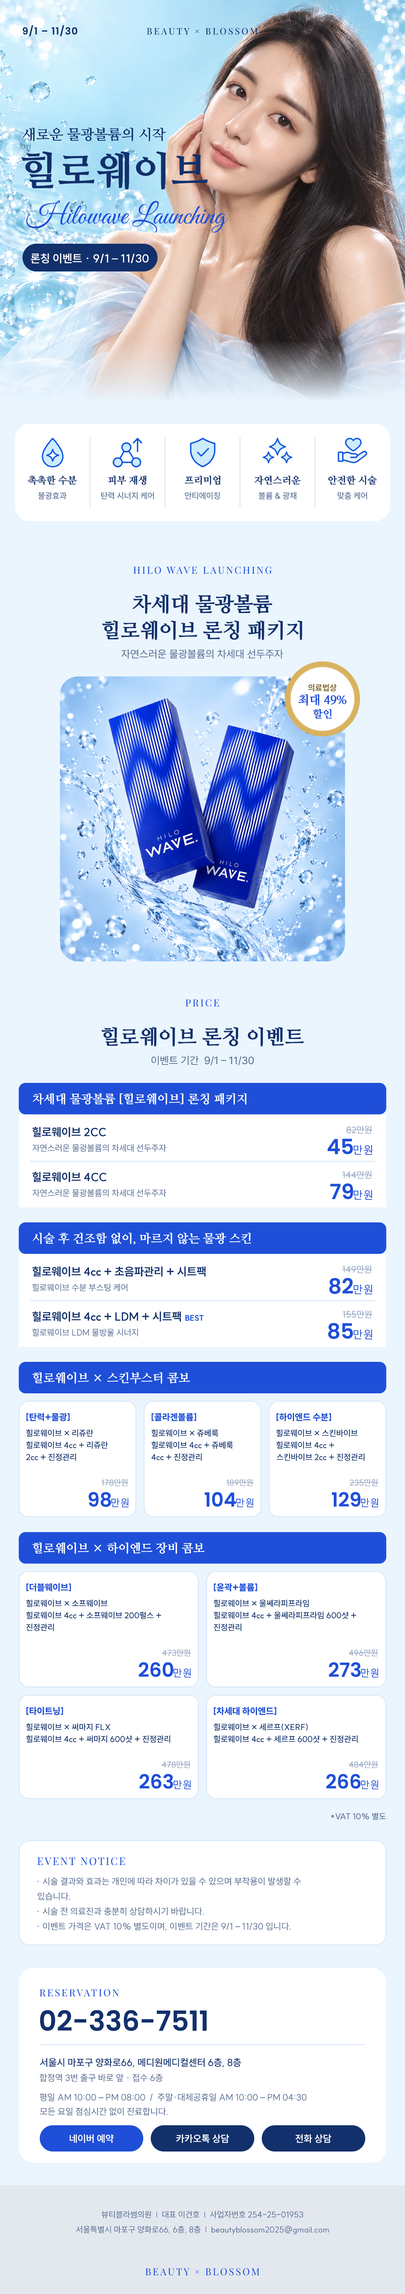
<style>
.page{position:relative;width:405px;height:2294px;background:#ffffff}
.page>*{position:absolute;margin:0}
.t1{font:9.8px "Poppins-SemiBold";letter-spacing:0.06em;color:#12306b}
.t2{font:9px "PlayfairDisplay-Regular";letter-spacing:0.2em;color:#12306b}
.t3{font:14.2px "NanumMyeongjoBold";color:#12306b}
.t4{font:39.8px "NanumMyeongjoExtraBold";color:#12306b}
.t5{font:28.5px "GreatVibes-Regular";color:#1f4fd8}
.t6{font:11.2px "SUIT-Bold";color:#ffffff}
.t7{font:9.8px "NanumMyeongjoExtraBold";color:#12306b}
.t8{font:8.2px "SUIT-Medium";color:#5b6f94}
.t9{font:8.2px "SUIT-Medium"}
.t10{font:9.8px "PlayfairDisplay-Regular";letter-spacing:0.16em}
.t11{font:20.2px "NanumMyeongjoExtraBold";color:#12306b}
.t12{font:10.5px "Pretendard-Regular";color:#5b6f94}
.t13{font:8.2px "SUIT-Bold";color:#7a6428}
.t14{font:12px "NanumMyeongjoExtraBold";color:#1f4fd8}
.t15{font:10.5px "NanumMyeongjoExtraBold";color:#1f4fd8}
.t16{font:9.8px "PlayfairDisplay-Regular";letter-spacing:0.16em;color:#1f4fd8}
.t17{font:12px "NanumMyeongjoExtraBold";color:#ffffff}
.t18{font:11.2px "SUIT-Bold";color:#12306b}
.t19{font:9px "SUIT-Medium";color:#9aa9c4}
.t20{font:8.6px "SUIT-Regular";color:#5b6f94}
.t21{font:21px "Poppins-SemiBold";color:#1f4fd8}
.t22{font:10.5px "Poppins-SemiBold";color:#1f4fd8}
.t23{font:7.5px "SUIT-ExtraBold";color:#1f4fd8}
.t24{font:9px "SUIT-ExtraBold";color:#1f4fd8}
.t25{font:8.2px "SUIT-Medium";color:#12306b}
.t26{font:8.2px "SUIT-Medium";color:#9aa9c4}
.t27{font:19.5px "Poppins-SemiBold";color:#1f4fd8}
.t28{font:9.8px "Poppins-SemiBold";color:#1f4fd8}
.t29{font:10.5px "PlayfairDisplay-Regular";letter-spacing:0.12em;color:#1f4fd8}
.t30{font:9px "SUIT-Regular";color:#5b6f94}
.t31{font:27.8px "Poppins-SemiBold";color:#12306b}
.t32{font:9.8px "SUIT-Medium";color:#12306b}
.t33{font:9.8px "SUIT-Bold";color:#ffffff}
.t34{font:8.2px "SUIT-Regular";color:#5b6f94}
</style>
<div class="page">
<p class="t1" style="left:22px;top:25px;width:55px;height:11px">9/1 – 11/30</p>
<p class="t2" style="left:147px;top:28px;width:111px;height:7px">BEAUTY × BLOSSOM</p>
<p class="t3" style="left:22px;top:128px;width:144px;height:13px">새로운 물광볼륨의 시작</p>
<p class="t4" style="left:21px;top:151px;width:187px;height:39px">힐로웨이브</p>
<p class="t5" style="left:26px;top:200px;width:202px;height:33px">Hilowave Launching</p>
<p class="t6" style="left:31px;top:253px;width:118px;height:11px">론칭 이벤트 · 9/1 – 11/30</p>
<p class="t7" style="left:28px;top:476px;width:49px;height:9px">촉촉한 수분</p>
<p class="t7" style="left:108px;top:476px;width:39px;height:9px">피부 재생</p>
<p class="t7" style="left:184px;top:476px;width:36px;height:9px">프리미엄</p>
<p class="t7" style="left:254px;top:476px;width:46px;height:9px">자연스러운</p>
<p class="t7" style="left:328px;top:476px;width:48px;height:9px">안전한 시술</p>
<p class="t8" style="left:38px;top:492px;width:29px;height:8px">물광효과</p>
<p class="t9" style="left:100px;top:492px;width:54px;height:8px">탄력 시너지 케어</p>
<p class="t8" style="left:185px;top:492px;width:35px;height:8px">안티에이징</p>
<p class="t8" style="left:258px;top:492px;width:38px;height:8px">볼륨 &amp; 광채</p>
<p class="t8" style="left:338px;top:492px;width:29px;height:8px">맞춤 케어</p>
<p class="t10" style="left:133px;top:567px;width:138px;height:7px">HILO WAVE LAUNCHING</p>
<p class="t11" style="left:132px;top:594px;width:140px;height:20px">차세대 물광볼륨</p>
<p class="t11" style="left:102px;top:621px;width:200px;height:19px">힐로웨이브 론칭 패키지</p>
<p class="t12" style="left:121px;top:649px;width:163px;height:10px">자연스러운 물광볼륨의 차세대 선두주자</p>
<p class="t13" style="left:308px;top:684px;width:29px;height:8px">의료법상</p>
<p class="t14" style="left:298px;top:694px;width:48px;height:12px">최대 49%</p>
<p class="t15" style="left:312px;top:709px;width:20px;height:10px">할인</p>
<p class="t16" style="left:186px;top:999px;width:33px;height:8px">PRICE</p>
<p class="t11" style="left:101px;top:1027px;width:202px;height:20px">힐로웨이브 론칭 이벤트</p>
<p class="t12" style="left:151px;top:1056px;width:103px;height:9px">이벤트 기간  9/1 – 11/30</p>
<p class="t17" style="left:32px;top:1093px;width:215px;height:12px">차세대 물광볼륨 [힐로웨이브] 론칭 패키지</p>
<p class="t18" style="left:32px;top:1127px;width:74px;height:10px">힐로웨이브 2CC</p>
<p class="t19" style="left:346px;top:1126px;width:26px;height:8px">82만원</p>
<p class="t20" style="left:32px;top:1144px;width:134px;height:8px">자연스러운 물광볼륨의 차세대 선두주자</p>
<p class="t21" style="left:327px;top:1139px;width:26px;height:15px">45</p>
<p class="t22" style="left:354px;top:1145px;width:18px;height:10px">만원</p>
<p class="t18" style="left:32px;top:1172px;width:74px;height:10px">힐로웨이브 4CC</p>
<p class="t19" style="left:342px;top:1171px;width:30px;height:8px">144만원</p>
<p class="t20" style="left:32px;top:1189px;width:134px;height:8px">자연스러운 물광볼륨의 차세대 선두주자</p>
<p class="t21" style="left:330px;top:1184px;width:23px;height:15px">79</p>
<p class="t22" style="left:354px;top:1190px;width:18px;height:10px">만원</p>
<p class="t17" style="left:32px;top:1233px;width:219px;height:12px">시술 후 건조함 없이, 마르지 않는 물광 스킨</p>
<p class="t19" style="left:342px;top:1265px;width:30px;height:9px">149만원</p>
<p class="t18" style="left:32px;top:1266px;width:174px;height:11px">힐로웨이브 4cc + 초음파관리 + 시트팩</p>
<p class="t21" style="left:329px;top:1278px;width:24px;height:16px">82</p>
<p class="t20" style="left:32px;top:1284px;width:96px;height:8px">힐로웨이브 수분 부스팅 케어</p>
<p class="t22" style="left:354px;top:1285px;width:18px;height:9px">만원</p>
<p class="t18" style="left:32px;top:1311px;width:149px;height:11px">힐로웨이브 4cc + LDM + 시트팩</p>
<p class="t19" style="left:342px;top:1310px;width:30px;height:8px">155만원</p>
<p class="t23" style="left:185px;top:1315px;width:19px;height:6px">BEST</p>
<p class="t21" style="left:328px;top:1323px;width:25px;height:16px">85</p>
<p class="t20" style="left:32px;top:1329px;width:106px;height:7px">힐로웨이브 LDM 물방울 시너지</p>
<p class="t22" style="left:354px;top:1330px;width:18px;height:10px">만원</p>
<p class="t17" style="left:32px;top:1372px;width:158px;height:12px">힐로웨이브 × 스킨부스터 콤보</p>
<p class="t24" style="left:26px;top:1413px;width:44px;height:8px">[탄력+물광]</p>
<p class="t24" style="left:151px;top:1413px;width:45px;height:8px">[콜라겐볼륨]</p>
<p class="t24" style="left:276px;top:1413px;width:55px;height:8px">[하이엔드 수분]</p>
<p class="t25" style="left:26px;top:1430px;width:67px;height:7px">힐로웨이브 × 리쥬란</p>
<p class="t9" style="left:151px;top:1430px;width:67px;height:7px">힐로웨이브 × 쥬베룩</p>
<p class="t9" style="left:276px;top:1430px;width:81px;height:7px">힐로웨이브 × 스킨바이브</p>
<p class="t25" style="left:26px;top:1442px;width:82px;height:7px">힐로웨이브 4cc + 리쥬란</p>
<p class="t25" style="left:151px;top:1442px;width:82px;height:7px">힐로웨이브 4cc + 쥬베룩</p>
<p class="t9" style="left:276px;top:1442px;width:58px;height:7px">힐로웨이브 4cc +</p>
<p class="t25" style="left:26px;top:1454px;width:50px;height:7px">2cc + 진정관리</p>
<p class="t9" style="left:151px;top:1454px;width:50px;height:7px">4cc + 진정관리</p>
<p class="t9" style="left:276px;top:1454px;width:88px;height:7px">스킨바이브 2cc + 진정관리</p>
<p class="t26" style="left:101px;top:1479px;width:27px;height:7px">178만원</p>
<p class="t26" style="left:226px;top:1479px;width:27px;height:7px">189만원</p>
<p class="t26" style="left:350px;top:1479px;width:28px;height:7px">235만원</p>
<p class="t27" style="left:88px;top:1492px;width:23px;height:15px">98</p>
<p class="t27" style="left:204px;top:1492px;width:32px;height:15px">104</p>
<p class="t27" style="left:332px;top:1492px;width:29px;height:15px">129</p>
<p class="t28" style="left:111px;top:1498px;width:17px;height:10px">만원</p>
<p class="t28" style="left:236px;top:1498px;width:17px;height:10px">만원</p>
<p class="t28" style="left:361px;top:1498px;width:17px;height:10px">만원</p>
<p class="t17" style="left:32px;top:1542px;width:172px;height:12px">힐로웨이브 × 하이엔드 장비 콤보</p>
<p class="t24" style="left:26px;top:1583px;width:45px;height:9px">[더블웨이브]</p>
<p class="t24" style="left:214px;top:1583px;width:43px;height:9px">[윤곽+볼륨]</p>
<p class="t25" style="left:26px;top:1600px;width:82px;height:7px">힐로웨이브 × 소프웨이브</p>
<p class="t25" style="left:214px;top:1600px;width:95px;height:7px">힐로웨이브 × 울쎄라피프라임</p>
<p class="t25" style="left:26px;top:1612px;width:135px;height:7px">힐로웨이브 4cc + 소프웨이브 200펄스 +</p>
<p class="t25" style="left:214px;top:1612px;width:142px;height:7px">힐로웨이브 4cc + 울쎄라피프라임 600샷 +</p>
<p class="t25" style="left:26px;top:1624px;width:28px;height:7px">진정관리</p>
<p class="t25" style="left:214px;top:1624px;width:28px;height:7px">진정관리</p>
<p class="t26" style="left:162px;top:1649px;width:29px;height:8px">473만원</p>
<p class="t26" style="left:349px;top:1649px;width:29px;height:8px">496만원</p>
<p class="t27" style="left:139px;top:1662px;width:34px;height:15px">260</p>
<p class="t28" style="left:174px;top:1668px;width:17px;height:10px">만원</p>
<p class="t27" style="left:329px;top:1662px;width:32px;height:15px">273</p>
<p class="t28" style="left:361px;top:1668px;width:17px;height:10px">만원</p>
<p class="t24" style="left:26px;top:1707px;width:37px;height:8px">[타이트닝]</p>
<p class="t24" style="left:214px;top:1707px;width:62px;height:8px">[차세대 하이엔드]</p>
<p class="t25" style="left:26px;top:1724px;width:84px;height:7px">힐로웨이브 × 써마지 FLX</p>
<p class="t25" style="left:214px;top:1724px;width:94px;height:7px">힐로웨이브 × 세르프(XERF)</p>
<p class="t25" style="left:26px;top:1736px;width:144px;height:7px">힐로웨이브 4cc + 써마지 600샷 + 진정관리</p>
<p class="t25" style="left:214px;top:1736px;width:144px;height:7px">힐로웨이브 4cc + 세르프 600샷 + 진정관리</p>
<p class="t26" style="left:162px;top:1761px;width:28px;height:7px">478만원</p>
<p class="t26" style="left:349px;top:1761px;width:29px;height:7px">484만원</p>
<p class="t27" style="left:140px;top:1774px;width:33px;height:15px">263</p>
<p class="t28" style="left:174px;top:1780px;width:17px;height:10px">만원</p>
<p class="t27" style="left:326px;top:1774px;width:35px;height:15px">266</p>
<p class="t28" style="left:361px;top:1780px;width:17px;height:10px">만원</p>
<p class="t8" style="left:331px;top:1813px;width:55px;height:7px">*VAT 10% 별도</p>
<p class="t29" style="left:38px;top:1857px;width:87px;height:9px">EVENT NOTICE</p>
<p class="t30" style="left:38px;top:1877px;width:263px;height:9px">· 시술 결과와 효과는 개인에 따라 차이가 있을 수 있으며 부작용이 발생할 수</p>
<p class="t30" style="left:38px;top:1892px;width:32px;height:8px">있습니다.</p>
<p class="t30" style="left:38px;top:1907px;width:166px;height:9px">· 시술 전 의료진과 충분히 상담하시기 바랍니다.</p>
<p class="t30" style="left:38px;top:1922px;width:253px;height:9px">· 이벤트 가격은 VAT 10% 별도이며, 이벤트 기간은 9/1 – 11/30 입니다.</p>
<p class="t16" style="left:40px;top:1989px;width:79px;height:8px">RESERVATION</p>
<p class="t31" style="left:40px;top:2010px;width:167px;height:21px">02-336-7511</p>
<p class="t32" style="left:40px;top:2058px;width:201px;height:10px">서울시 마포구 양화로66, 메디원메디컬센터 6층, 8층</p>
<p class="t30" style="left:40px;top:2074px;width:123px;height:8px">합정역 3번 출구 바로 앞 · 접수 6층</p>
<p class="t30" style="left:40px;top:2093px;width:267px;height:9px">평일 AM 10:00 – PM 08:00  /  주말·대체공휴일 AM 10:00 – PM 04:30</p>
<p class="t30" style="left:40px;top:2108px;width:128px;height:8px">모든 요일 점심시간 없이 진료합니다.</p>
<p class="t33" style="left:69px;top:2134px;width:44px;height:10px">네이버 예약</p>
<p class="t33" style="left:176px;top:2134px;width:53px;height:10px">카카오톡 상담</p>
<p class="t33" style="left:296px;top:2134px;width:36px;height:10px">전화 상담</p>
<p class="t34" style="left:101px;top:2211px;width:202px;height:7px">뷰티블라썸의원  |  대표 이건호  |  사업자번호 254-25-01953</p>
<p class="t34" style="left:76px;top:2226px;width:253px;height:9px">서울특별시 마포구 양화로66, 6층, 8층  |  beautyblossom2025@gmail.com</p>
<p class="t10" style="left:145px;top:2268px;width:114px;height:8px">BEAUTY × BLOSSOM</p>
</div>
